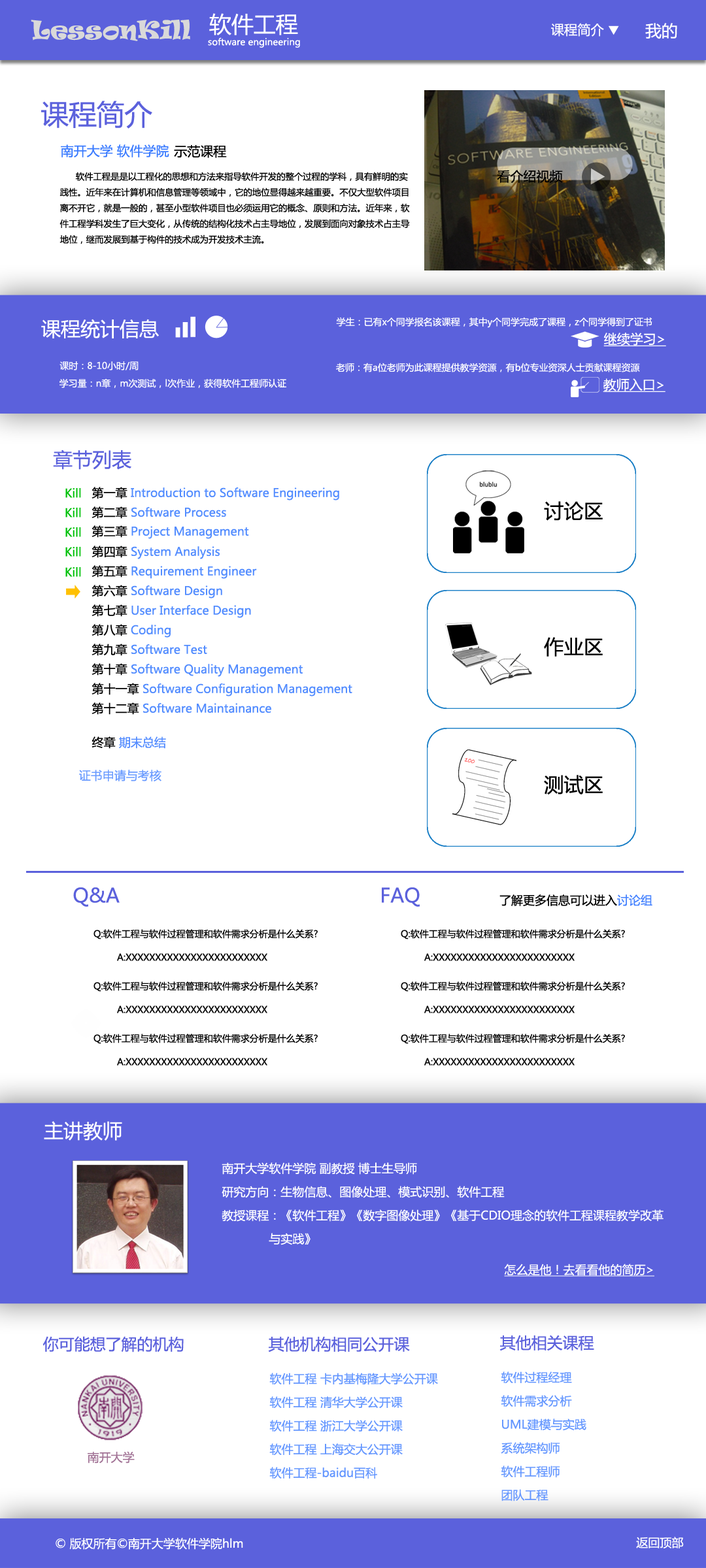
<style>
.page{position:relative;width:706px;height:1568px;background:#ffffff}
.page>*{position:absolute;margin:0}
.t1{font:22.2px "MicrosoftYaHei";color:#ffffff}
.t2{font:23.5px "Ravie";color:#d9d9d9}
.t3{font:13.2px "MicrosoftYaHei";color:#ffffff}
.t4{font:16.2px "MicrosoftYaHei";color:#ffffff}
.t5{font:9.1px "MicrosoftYaHei";color:#ffffff}
.t6{font:27.9px "MicrosoftYaHei";color:#5b61dc}
.t7{font:13.1px "MicrosoftYaHei";color:#3a7bff}
.t8{font:13.1px "MicrosoftYaHei";color:#000000}
.t9{font:8.7px/15.7px "MicrosoftYaHei";color:#010101}
.t10{font:19.6px "MicrosoftYaHei";color:#ffffff}
.t11{font:13.1px "MicrosoftYaHei";color:#ffffff;text-decoration:underline}
.t12{font:19.6px "MicrosoftYaHei";color:#5b61dc}
.t13{font:11.8px "MicrosoftYaHei";color:#00c109}
.t14{font:11.8px "MicrosoftYaHei";color:#528cff}
.t15{font:11.8px "MicrosoftYaHei";color:#000000}
.t16{font:19.8px "MicrosoftYaHei";color:#000000}
.t17{font:11.8px "MicrosoftYaHei";color:#6a9bff}
.t18{font:11.8px "MicrosoftYaHei";color:#4381ff}
.t19{font:9.1px/23.5px "MicrosoftYaHei";color:#010101}
.t20{font:11.8px/23.5px "MicrosoftYaHei";color:#ffffff}
.t21{font:11.8px "MicrosoftYaHei";color:#ffffff;text-decoration:underline}
.t22{font:15.7px "MicrosoftYaHei";color:#5b61dc}
.t23{font:11.8px/23.5px "MicrosoftYaHei";color:#6598ff}
.t24{font:11.8px "MicrosoftYaHei";color:#a17295}
.t25{font:11.8px "MicrosoftYaHei";color:#ffffff}
</style>
<div class="page">
<p class="t1" style="left:209px;top:13px;width:89px;height:22px">软件工程</p>
<p class="t2" style="left:31px;top:20px;width:159px;height:21px">LessonKill</p>
<p class="t3" style="left:551px;top:23px;width:53px;height:14px">课程简介</p>
<p class="t4" style="left:645px;top:23px;width:32px;height:16px">我的</p>
<p class="t5" style="left:208px;top:37px;width:92px;height:11px">software engineering</p>
<p class="t6" style="left:41px;top:101px;width:111px;height:28px">课程简介</p>
<p class="t7" style="left:61px;top:144px;width:108px;height:13px">南开大学 软件学院</p>
<p class="t8" style="left:174px;top:145px;width:53px;height:13px">示范课程</p>
<p class="t9" style="left:59px;top:172px;width:351px;height:72px">软件工程是是以工程化的思想和方法来指导软件开发的整个过程的学科，具有鲜明的实<br>践性。近年来在计算机和信息管理等领域中，它的地位显得越来越重要。不仅大型软件项目<br>离不开它，就是一般的，甚至小型软件项目也必须运用它的概念、原则和方法。近年来，软<br>件工程学科发生了巨大变化，从传统的结构化技术占主导地位，发展到面向对象技术占主导<br>地位，继而发展到基于构件的技术成为开发技术主流。</p>
<p class="t8" style="left:497px;top:170px;width:66px;height:13px">看介绍视频</p>
<p class="t5" style="left:336px;top:317px;width:316px;height:11px">学生：已有x个同学报名该课程，其中y个同学完成了课程，z个同学得到了证书</p>
<p class="t10" style="left:41px;top:319px;width:118px;height:20px">课程统计信息</p>
<p class="t11" style="left:603px;top:333px;width:63px;height:13px">继续学习&gt;</p>
<p class="t5" style="left:59px;top:361px;width:80px;height:9px">课时：8-10小时/周</p>
<p class="t5" style="left:336px;top:363px;width:304px;height:9px">老师：有a位老师为此课程提供教学资源，有b位专业资深人士贡献课程资源</p>
<p class="t5" style="left:59px;top:378px;width:227px;height:10px">学习量：n章，m次测试，l次作业，获得软件工程师认证</p>
<p class="t11" style="left:602px;top:378px;width:63px;height:14px">教师入口&gt;</p>
<p class="t12" style="left:53px;top:449px;width:78px;height:21px">章节列表</p>
<p class="t13" style="left:65px;top:488px;width:16px;height:10px">Kill</p>
<p class="t14" style="left:91px;top:487px;width:248px;height:13px"><span class="t15">第一章 </span>Introduction to Software Engineering</p>
<p class="t13" style="left:65px;top:508px;width:16px;height:9px">Kill</p>
<p class="t14" style="left:91px;top:506px;width:135px;height:13px"><span class="t15">第二章 </span>Software Process</p>
<p class="t16" style="left:544px;top:501px;width:58px;height:20px">讨论区</p>
<p class="t13" style="left:65px;top:527px;width:16px;height:10px">Kill</p>
<p class="t14" style="left:91px;top:525px;width:158px;height:14px"><span class="t15">第三章 </span>Project Management</p>
<p class="t14" style="left:91px;top:546px;width:129px;height:13px"><span class="t15">第四章 </span>System Analysis</p>
<p class="t13" style="left:65px;top:547px;width:16px;height:10px">Kill</p>
<p class="t13" style="left:65px;top:567px;width:16px;height:10px">Kill</p>
<p class="t14" style="left:91px;top:565px;width:166px;height:14px"><span class="t15">第五章 </span>Requirement Engineer</p>
<p class="t14" style="left:91px;top:585px;width:131px;height:13px"><span class="t15">第六章 </span>Software Design</p>
<p class="t14" style="left:91px;top:604px;width:160px;height:14px"><span class="t15">第七章 </span>User Interface Design</p>
<p class="t14" style="left:91px;top:624px;width:80px;height:14px"><span class="t15">第八章 </span>Coding</p>
<p class="t16" style="left:544px;top:637px;width:58px;height:20px">作业区</p>
<p class="t14" style="left:91px;top:644px;width:116px;height:12px"><span class="t15">第九章 </span>Software Test</p>
<p class="t14" style="left:91px;top:663px;width:211px;height:14px"><span class="t15">第十章 </span>Software Quality Management</p>
<p class="t14" style="left:91px;top:683px;width:261px;height:13px"><span class="t15">第十一章 </span>Software Configuration Management</p>
<p class="t14" style="left:91px;top:702px;width:180px;height:13px"><span class="t15">第十二章 </span>Software Maintainance</p>
<p class="t14" style="left:91px;top:736px;width:75px;height:13px"><span class="t15">终章 </span>期末总结</p>
<p class="t17" style="left:79px;top:770px;width:82px;height:11px">证书申请与考核</p>
<p class="t16" style="left:544px;top:775px;width:58px;height:19px">测试区</p>
<p class="t12" style="left:73px;top:887px;width:47px;height:20px">Q&amp;A</p>
<p class="t12" style="left:382px;top:887px;width:37px;height:20px">FAQ</p>
<p class="t15" style="left:499px;top:894px;width:153px;height:12px">了解更多信息可以进入<span class="t18">讨论组</span></p>
<p class="t19" style="left:93px;top:929px;width:225px;height:32px">Q:软件工程与软件过程管理和软件需求分析是什么关系?<br> A:XXXXXXXXXXXXXXXXXXXXXXXX</p>
<p class="t19" style="left:400px;top:929px;width:225px;height:32px">Q:软件工程与软件过程管理和软件需求分析是什么关系?<br> A:XXXXXXXXXXXXXXXXXXXXXXXX</p>
<p class="t19" style="left:93px;top:981px;width:225px;height:32px">Q:软件工程与软件过程管理和软件需求分析是什么关系?<br> A:XXXXXXXXXXXXXXXXXXXXXXXX</p>
<p class="t19" style="left:400px;top:981px;width:225px;height:32px">Q:软件工程与软件过程管理和软件需求分析是什么关系?<br> A:XXXXXXXXXXXXXXXXXXXXXXXX</p>
<p class="t19" style="left:93px;top:1034px;width:225px;height:32px">Q:软件工程与软件过程管理和软件需求分析是什么关系?<br> A:XXXXXXXXXXXXXXXXXXXXXXXX</p>
<p class="t19" style="left:400px;top:1034px;width:225px;height:32px">Q:软件工程与软件过程管理和软件需求分析是什么关系?<br> A:XXXXXXXXXXXXXXXXXXXXXXXX</p>
<p class="t10" style="left:44px;top:1121px;width:78px;height:20px">主讲教师</p>
<p class="t20" style="left:221px;top:1162px;width:442px;height:83px">南开大学软件学院 副教授 博士生导师<br>研究方向：生物信息、图像处理、模式识别、软件工程<br>教授课程：《软件工程》《数字图像处理》《基于CDIO理念的软件工程课程教学改革<br>  与实践》</p>
<p class="t21" style="left:504px;top:1264px;width:150px;height:13px">怎么是他！去看看他的简历&gt;</p>
<p class="t22" style="left:42px;top:1336px;width:142px;height:16px">你可能想了解的机构</p>
<p class="t22" style="left:268px;top:1336px;width:142px;height:16px">其他机构相同公开课</p>
<p class="t22" style="left:499px;top:1335px;width:95px;height:16px">其他相关课程</p>
<p class="t23" style="left:269px;top:1373px;width:169px;height:106px">软件工程 卡内基梅隆大学公开课<br>软件工程 清华大学公开课<br>软件工程 浙江大学公开课<br>软件工程 上海交大公开课<br>软件工程-baidu百科</p>
<p class="t23" style="left:500px;top:1371px;width:86px;height:130px">软件过程经理<br>软件需求分析<br>UML建模与实践<br>系统架构师<br>软件工程师<br>团队工程</p>
<p class="t24" style="left:88px;top:1451px;width:47px;height:12px">南开大学</p>
<p class="t25" style="left:56px;top:1537px;width:187px;height:13px">© 版权所有©南开大学软件学院hlm</p>
<p class="t25" style="left:636px;top:1537px;width:47px;height:11px">返回顶部</p>
</div>
